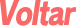
<style>
.page{position:relative;width:76px;height:26px;background:#fa6867}
.page>*{position:absolute;margin:0}
.t1{font:32px "RodinPro-EB";letter-spacing:-0.054em;color:#fa6867;font-style:italic;scale:0.84 1}
</style>
<div class="page">
<p class="t1" style="left:0px;top:0px;width:76px;height:26px">Voltar</p>
</div>
